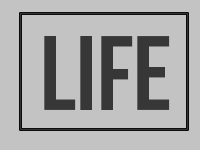
<style>
.page{position:relative;width:200px;height:150px;background:#c3c3c3}
.page>*{position:absolute;margin:0}
.t1{font:106px "BebasNeue";color:#383737;text-transform:uppercase}
</style>
<div class="page">
<p class="t1" style="left:44px;top:36px;width:126px;height:74px">life</p>
</div>
